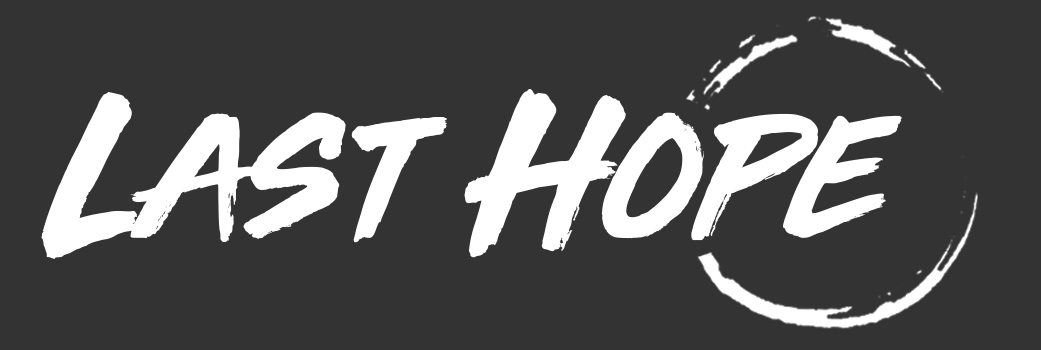
<style>
.page{position:relative;width:1041px;height:350px;background:#333333}
.page>*{position:absolute;margin:0}
.t1{font:201.7px "ThirdRail";color:#ffffff}
</style>
<div class="page">
<p class="t1" style="left:41px;top:89px;width:861px;height:170px">Last Hope</p>
</div>
